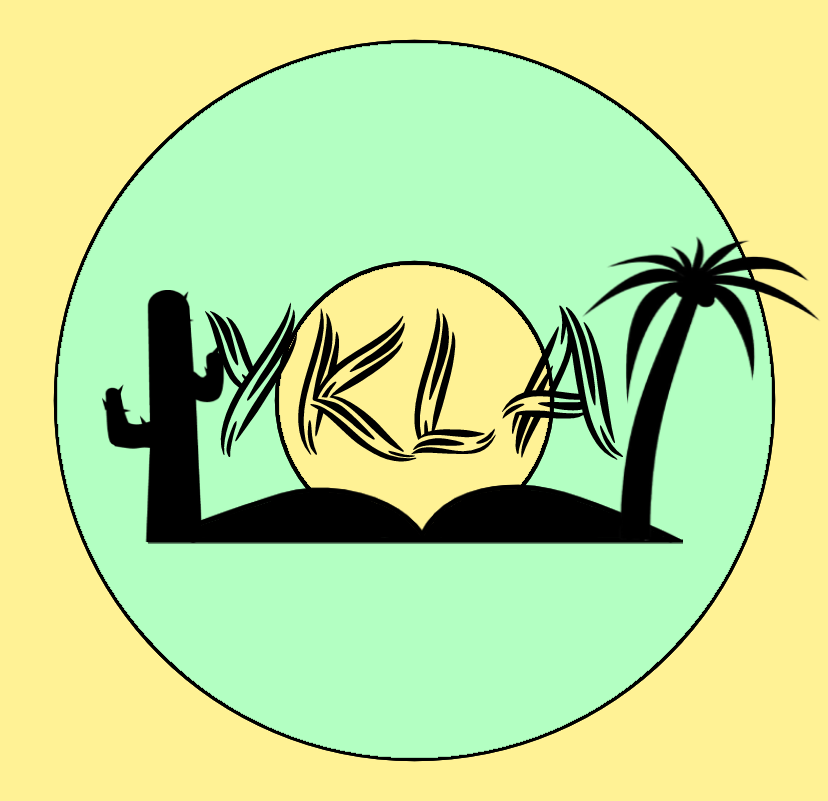
<style>
.page{position:relative;width:828px;height:801px;background:#fff295}
.page>*{position:absolute;margin:0}
.t1{font:200px "Akronim-Regular";color:#000000}
</style>
<div class="page">
<p class="t1" style="left:205px;top:302px;width:419px;height:160px">YKLA</p>
</div>
